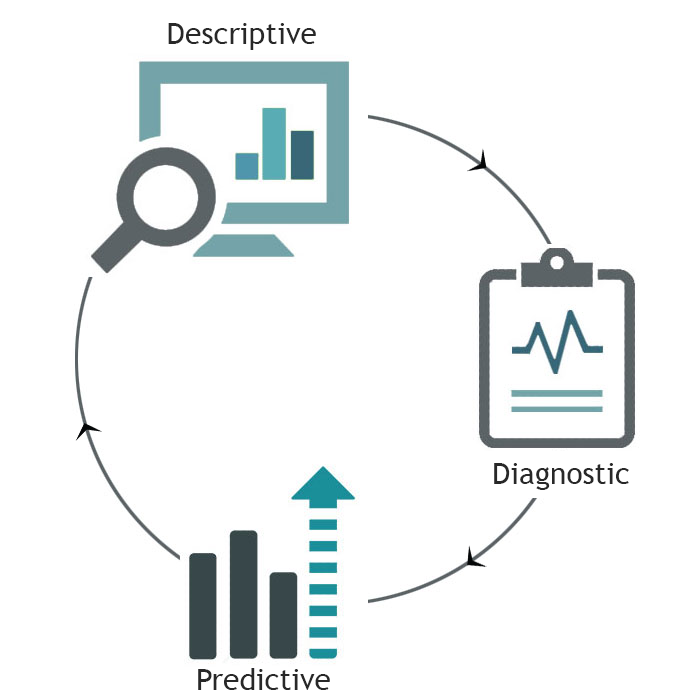
<style>
.page{position:relative;width:700px;height:700px;background:#ffffff}
.page>*{position:absolute;margin:0}
.t1{font:30px "TrebuchetMS";color:#282828}
</style>
<div class="page">
<p class="t1" style="left:168px;top:23px;width:148px;height:27px">Descriptive</p>
<p class="t1" style="left:494px;top:463px;width:135px;height:27px">Diagnostic</p>
<p class="t1" style="left:198px;top:668px;width:132px;height:22px">Predictive</p>
</div>
